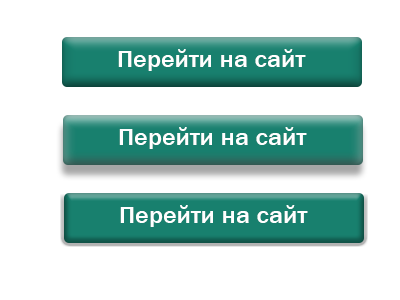
<style>
.page{position:relative;width:400px;height:300px;background:#ffffff}
.page>*{position:absolute;margin:0}
.t1{font:24px "FranklinGothic-Medium";color:#ffffff;scale:1.09 1}
</style>
<div class="page">
<p class="t1" style="left:118px;top:49px;width:188px;height:22px">Перейти на сайт</p>
<p class="t1" style="left:119px;top:127px;width:188px;height:22px">Перейти на сайт</p>
<p class="t1" style="left:120px;top:205px;width:188px;height:22px">Перейти на сайт</p>
</div>
